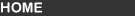
<style>
.page{position:relative;width:135px;height:16px;background:#333333}
.page>*{position:absolute;margin:0}
.t1{font:14px "ArialRoundedMTBold";color:#ffffff}
</style>
<div class="page">
<p class="t1" style="left:1px;top:2px;width:42px;height:11px">HOME</p>
</div>
